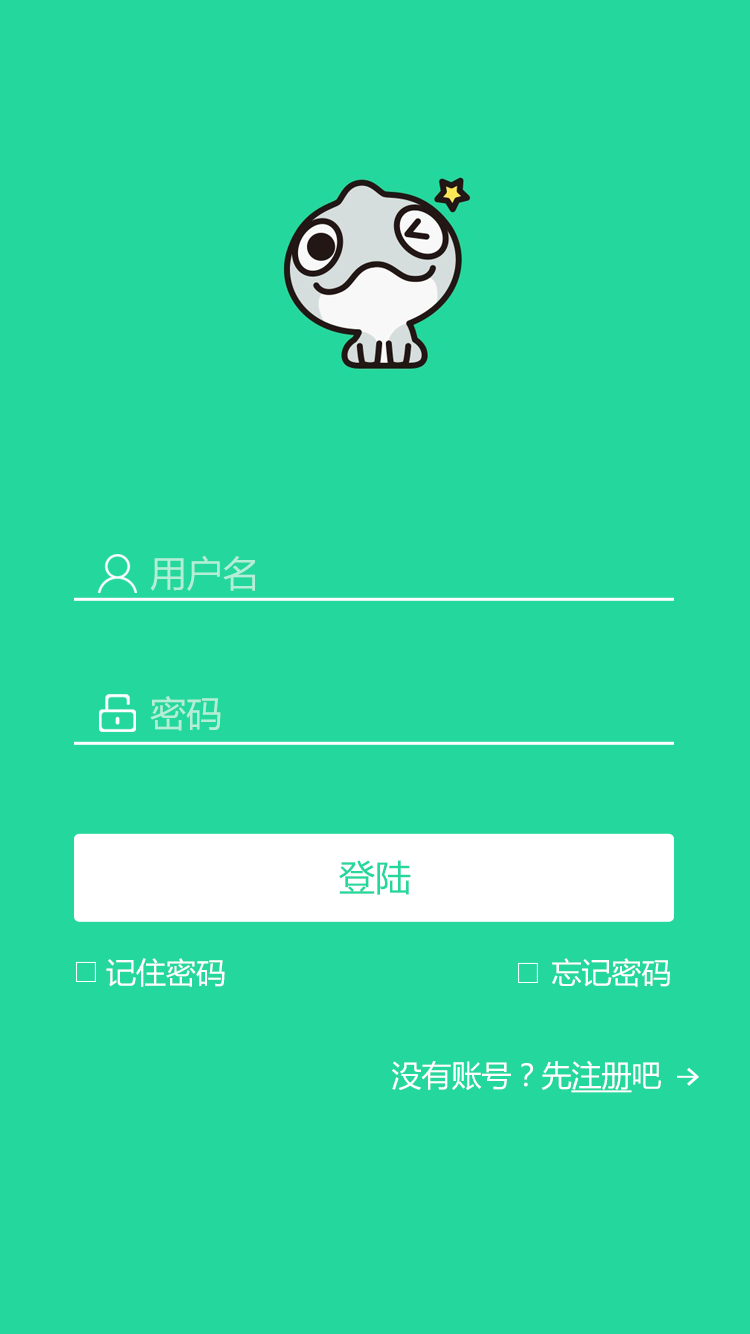
<style>
.page{position:relative;width:750px;height:1334px;background:#24d79d}
.page>*{position:absolute;margin:0}
.t1{font:35.9px "MicrosoftYaHei";color:#b5eed7}
.t2{font:36px "MicrosoftYaHei";color:#24d79d}
.t3{font:29.6px "MicrosoftYaHei";color:#ffffff}
.t4{font:30px "MicrosoftYaHei";color:#ffffff}
.t5{font:30px "MicrosoftYaHei";color:#ffffff;text-decoration:underline}
</style>
<div class="page">
<p class="t1" style="left:150px;top:555px;width:105px;height:36px">用户名</p>
<p class="t1" style="left:150px;top:696px;width:71px;height:35px">密码</p>
<p class="t2" style="left:339px;top:860px;width:72px;height:35px">登陆</p>
<p class="t3" style="left:106px;top:958px;width:119px;height:29px">记住密码</p>
<p class="t3" style="left:552px;top:958px;width:118px;height:29px">忘记密码</p>
<p class="t4" style="left:392px;top:1061px;width:269px;height:32px">没有账号？先<span class="t5">注册</span>吧</p>
</div>
